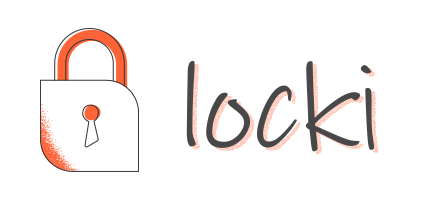
<style>
.page{position:relative;width:432px;height:200px;background:#ffffff}
.page>*{position:absolute;margin:0}
.t1{font:120.7px "InkFree";color:#484848}
</style>
<div class="page">
<p class="t1" style="left:186px;top:60px;width:189px;height:92px">locki</p>
</div>
